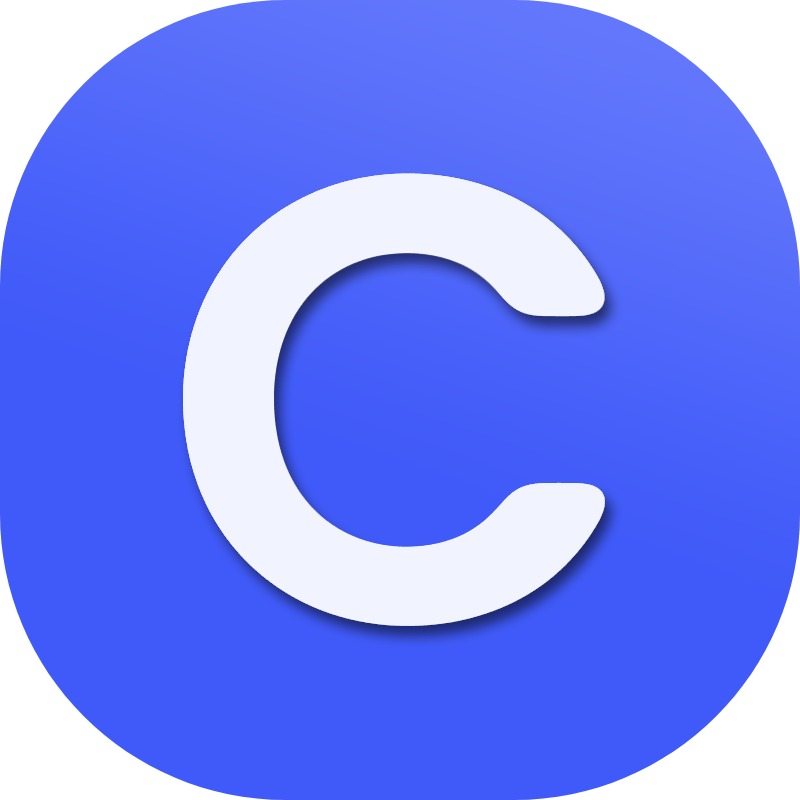
<style>
.page{position:relative;width:800px;height:800px;background:#405af9}
.page>*{position:absolute;margin:0}
.t1{font:637px "Poppins-SemiBold";color:#f1f4ff}
</style>
<div class="page">
<p class="t1" style="left:182px;top:172px;width:435px;height:455px">C</p>
</div>
